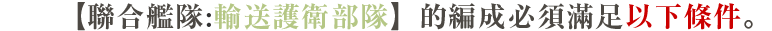
<style>
.page{position:relative;width:772px;height:31px;background:#ffffff}
.page>*{position:absolute;margin:0}
.t1{font:28px "RyuminPr6N-ExBold";letter-spacing:0.05em;color:#4c4843}
.t2{font:28px "RyuminPr6N-ExBold";letter-spacing:0.05em;color:#323232}
.t3{font:28px "RyuminPr6N-ExBold";letter-spacing:0.05em;color:#b5c785}
.t4{font:28px "RyuminPr6N-ExBold";letter-spacing:0.05em;color:#cc0000}
</style>
<div class="page">
<p class="t1" style="left:77px;top:2px;width:676px;height:29px">【聯合艦隊<span class="t2">:</span><span class="t3">輸送護衛部隊</span>】的編成必須滿足<span class="t4">以下條件</span>。</p>
</div>
